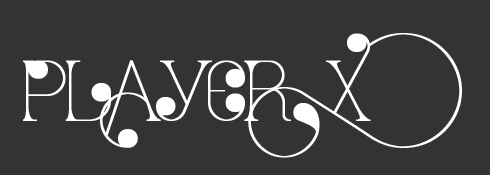
<style>
.page{position:relative;width:490px;height:175px;background:#333333}
.page>*{position:absolute;margin:0}
.t1{font:70px/35px "PortVintage-DcrMed";letter-spacing:0.01em;color:#ffffff;text-transform:uppercase;font-weight:bold}
</style>
<div class="page">
<p class="t1" style="left:23px;top:33px;width:439px;height:125px;text-align:center">PLayer X</p>
</div>
